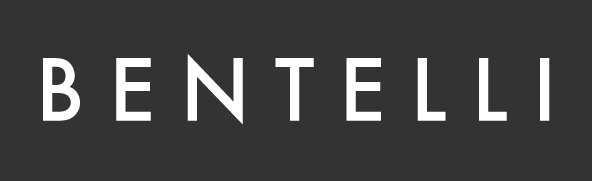
<style>
.page{position:relative;width:592px;height:181px;background:#333333}
.page>*{position:absolute;margin:0}
.t1{font:83.3px "Futura-Medium";letter-spacing:0.29em;color:#ffffff}
</style>
<div class="page">
<p class="t1" style="left:43px;top:53px;width:507px;height:72px">BENTELLI</p>
</div>
